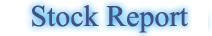
<style>
.page{position:relative;width:212px;height:36px;background:#ffffff}
.page>*{position:absolute;margin:0}
.t1{font:30px "TimesNewRomanPSMT";color:#445186}
.t2{font:27px "TimesNewRomanPSMT";color:#445186}
</style>
<div class="page">
<p class="t1" style="left:32px;top:5px;width:156px;height:28px"><span class="t2">   </span>Stock Report</p>
</div>
